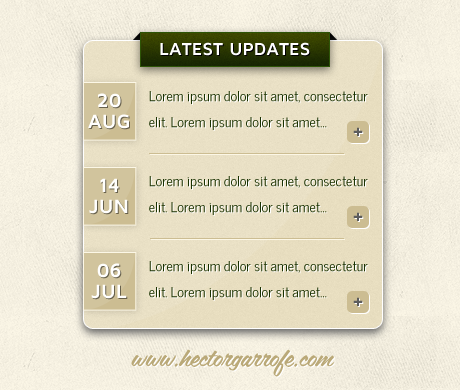
<style>
.page{position:relative;width:460px;height:390px}
.page>*{position:absolute;margin:0}
.t1{font:18px "MavenProBold";color:#ffffff;text-transform:uppercase}
.t2{font:20px/21px "MavenProBold";color:#fffffe}
.t3{font:14px/26px "NewsCycle";color:#1a3202}
.t4{font:24px "MavenProBold";color:#5d5d5d}
.t5{font:24px "CoffeeService";color:#baa978}
</style>
<div class="page">
<p class="t1" style="left:160px;top:42px;width:150px;height:14px">Latest updates</p>
<p class="t2" style="left:88px;top:93px;width:41px;height:36px;text-align:center">20<br>AUG</p>
<p class="t3" style="left:149px;top:91px;width:219px;height:39px">Lorem ipsum dolor sit amet, consectetur elit. Lorem ipsum dolor sit amet...</p>
<p class="t4" style="left:353px;top:127px;width:10px;height:9px">+</p>
<p class="t2" style="left:89px;top:178px;width:39px;height:36px;text-align:center">14<br>JUN</p>
<p class="t3" style="left:149px;top:176px;width:219px;height:39px">Lorem ipsum dolor sit amet, consectetur elit. Lorem ipsum dolor sit amet...</p>
<p class="t4" style="left:353px;top:212px;width:10px;height:9px">+</p>
<p class="t2" style="left:91px;top:263px;width:36px;height:36px;text-align:center">06<br>JUL</p>
<p class="t3" style="left:149px;top:261px;width:219px;height:39px">Lorem ipsum dolor sit amet, consectetur elit. Lorem ipsum dolor sit amet...</p>
<p class="t4" style="left:353px;top:297px;width:10px;height:9px">+</p>
<p class="t5" style="left:131px;top:349px;width:203px;height:28px">www.hectorgarrofe.com</p>
</div>
